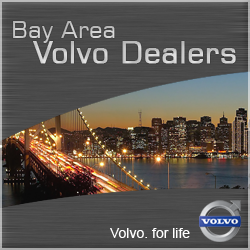
<style>
.page{position:relative;width:250px;height:250px}
.page>*{position:absolute;margin:0}
.t1{font:30px/25px "Square721BT-Roman";color:#cdcdcd;font-weight:bold}
.t2{font:24px/25px "Square721BT-Roman";color:#cdcdcd}
.t3{font:14px "ArialMT";color:#ffffff}
</style>
<div class="page">
<p class="t1" style="left:13px;top:21px;width:223px;height:43px"><span class="t2">Bay Area<br></span>  Volvo Dealers</p>
<p class="t3" style="left:110px;top:228px;width:80px;height:10px">Volvo. for life</p>
</div>
